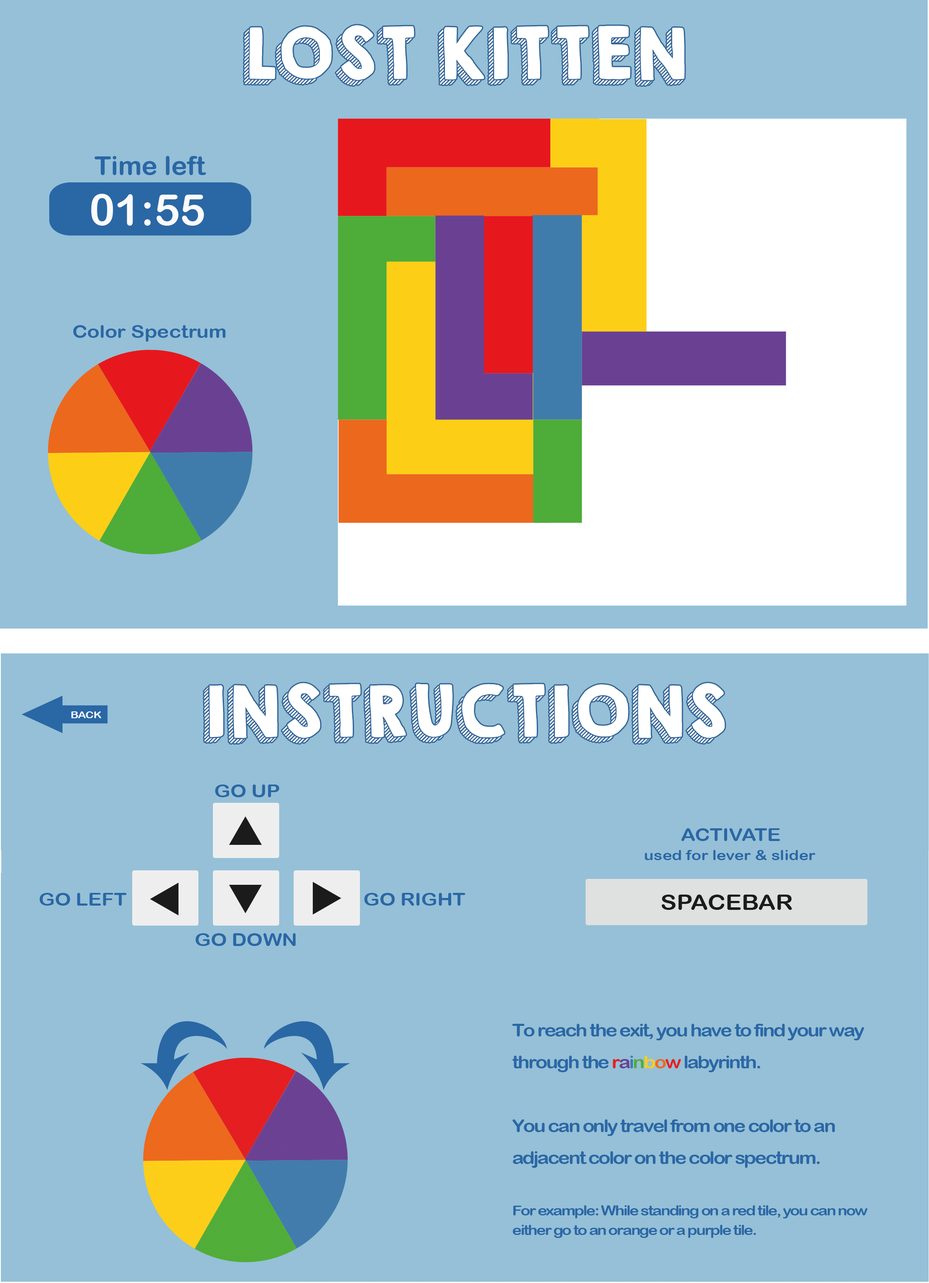
<style>
.page{position:relative;width:929px;height:1283px;background:#95c0d7}
.page>*{position:absolute;margin:0}
.t1{font:63.8px "KGHAPPY";color:#ffffff}
.t2{font:17.7px "ArialRoundedMTBold";color:#2a67a5;scale:1.14 1}
.t3{font:9.8px "ArialRoundedMTBold";color:#fcfdfe;scale:1.12 1}
.t4{font:14.2px "ArialRoundedMTBold";color:#2a67a5;scale:1.14 1}
.t5{font:17.8px "ArialRoundedMTBold";color:#2a67a5;scale:1.14 1}
.t6{font:21.2px "ArialRoundedMTBold";color:#1b1b1b;scale:1.14 1}
.t7{font:14.2px/19.5px "ArialRoundedMTBold";letter-spacing:-0.08em;color:#2a67a5;scale:1.14 1}
.t8{font:17.7px/31.9px "ArialRoundedMTBold";letter-spacing:-0.08em;color:#2a67a5;scale:1.14 1}
.t9{font:17.7px/31.9px "ArialRoundedMTBold";letter-spacing:-0.08em;color:#e51f21;scale:1.14 1}
.t10{font:17.7px/31.9px "ArialRoundedMTBold";letter-spacing:-0.08em;color:#6b4292;scale:1.14 1}
.t11{font:17.7px/31.9px "ArialRoundedMTBold";letter-spacing:-0.08em;color:#427dac;scale:1.14 1}
.t12{font:17.7px/31.9px "ArialRoundedMTBold";letter-spacing:-0.08em;color:#52ad39;scale:1.14 1}
.t13{font:17.7px/31.9px "ArialRoundedMTBold";letter-spacing:-0.08em;color:#fdce19;scale:1.14 1}
.t14{font:17.7px/31.9px "ArialRoundedMTBold";letter-spacing:-0.08em;color:#ed691d;scale:1.14 1}
</style>
<div class="page">
<p class="t1" style="left:244px;top:25px;width:441px;height:60px">LOST KITTEN</p>
<p class="t2" style="left:73px;top:325px;width:153px;height:17px">Color Spectrum</p>
<p class="t1" style="left:204px;top:683px;width:521px;height:60px">INSTRUCTIONS</p>
<p class="t3" style="left:71px;top:712px;width:30px;height:6px">BACK</p>
<p class="t2" style="left:215px;top:785px;width:64px;height:12px">GO UP</p>
<p class="t2" style="left:681px;top:828px;width:99px;height:13px">ACTIVATE</p>
<p class="t4" style="left:645px;top:850px;width:171px;height:10px">used for lever &amp; slider</p>
<p class="t5" style="left:40px;top:893px;width:87px;height:13px">GO LEFT</p>
<p class="t5" style="left:364px;top:893px;width:101px;height:13px">GO RIGHT</p>
<p class="t6" style="left:662px;top:895px;width:130px;height:15px">SPACEBAR</p>
<p class="t5" style="left:196px;top:933px;width:100px;height:13px">GO DOWN</p>
<p class="t7" style="left:512px;top:1024px;width:356px;height:214px"><span class="t8">To reach the exit, you have to find your way<br>through the </span><span class="t9">r</span><span class="t10">a</span><span class="t11">i</span><span class="t12">n</span><span class="t13">b</span><span class="t14">o</span><span class="t9">w</span><span class="t8"> labyrinth.<br><br>You can only travel from one color to an <br>adjacent color on the color spectrum.<br><br></span>For example: While standing on a red tile, you can now<br>either go to an orange or a purple tile.</p>
</div>
